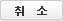
<style>
.page{position:relative;width:63px;height:21px}
.page>*{position:absolute;margin:0}
.t1{font:11px "YDIWebDotum";color:#333333;font-weight:bold}
</style>
<div class="page">
<p class="t1" style="left:15px;top:6px;width:32px;height:10px">취   소</p>
</div>
